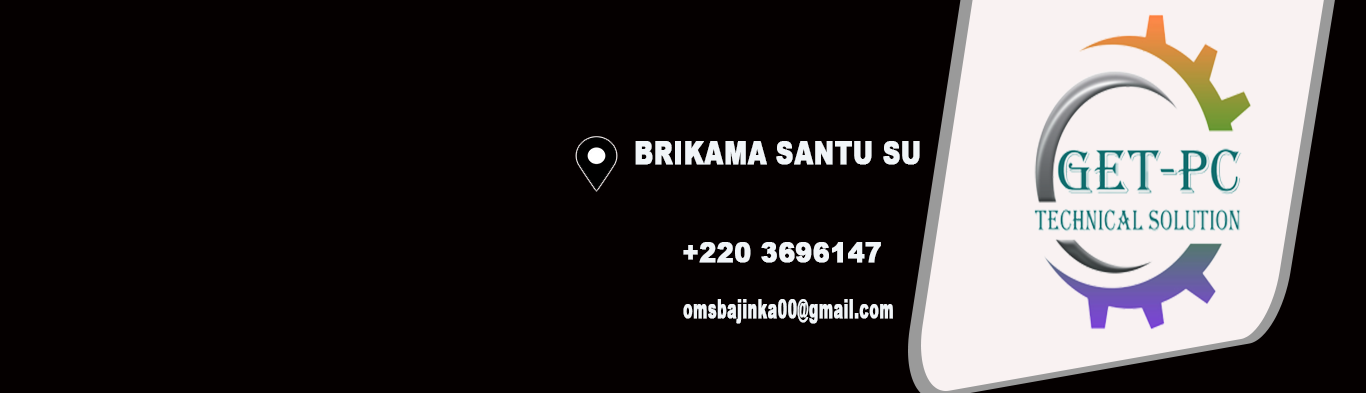
<style>
.page{position:relative;width:1366px;height:393px;background:#050000}
.page>*{position:absolute;margin:0}
.t1{font:30.9px "Arial-Black";letter-spacing:0.005em;color:#f1f5f8;font-weight:bold;scale:0.78 1}
.t2{font:26.6px "Arial-Black";letter-spacing:0.005em;color:#f1f5f8;font-weight:bold;scale:0.93 1}
.t3{font:25.8px "Arial-Black";letter-spacing:0.005em;color:#f1f5f8;font-weight:bold;scale:0.56 1}
</style>
<div class="page">
<p class="t1" style="left:635px;top:141px;width:285px;height:24px">BRIKAMA SANTU SU</p>
<p class="t2" style="left:683px;top:242px;width:198px;height:21px">+220 3696147</p>
<p class="t3" style="left:683px;top:299px;width:210px;height:25px">omsbajinka00@gmail.com</p>
</div>
